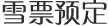
<style>
.page{position:relative;width:109px;height:26px;background:#ffffff}
.page>*{position:absolute;margin:0}
.t1{font:26px "GJJZQJW--GB1-0";color:#2e2e2e;font-weight:bold}
</style>
<div class="page">
<p class="t1" style="left:2px;top:0px;width:105px;height:25px">雪票预定</p>
</div>
